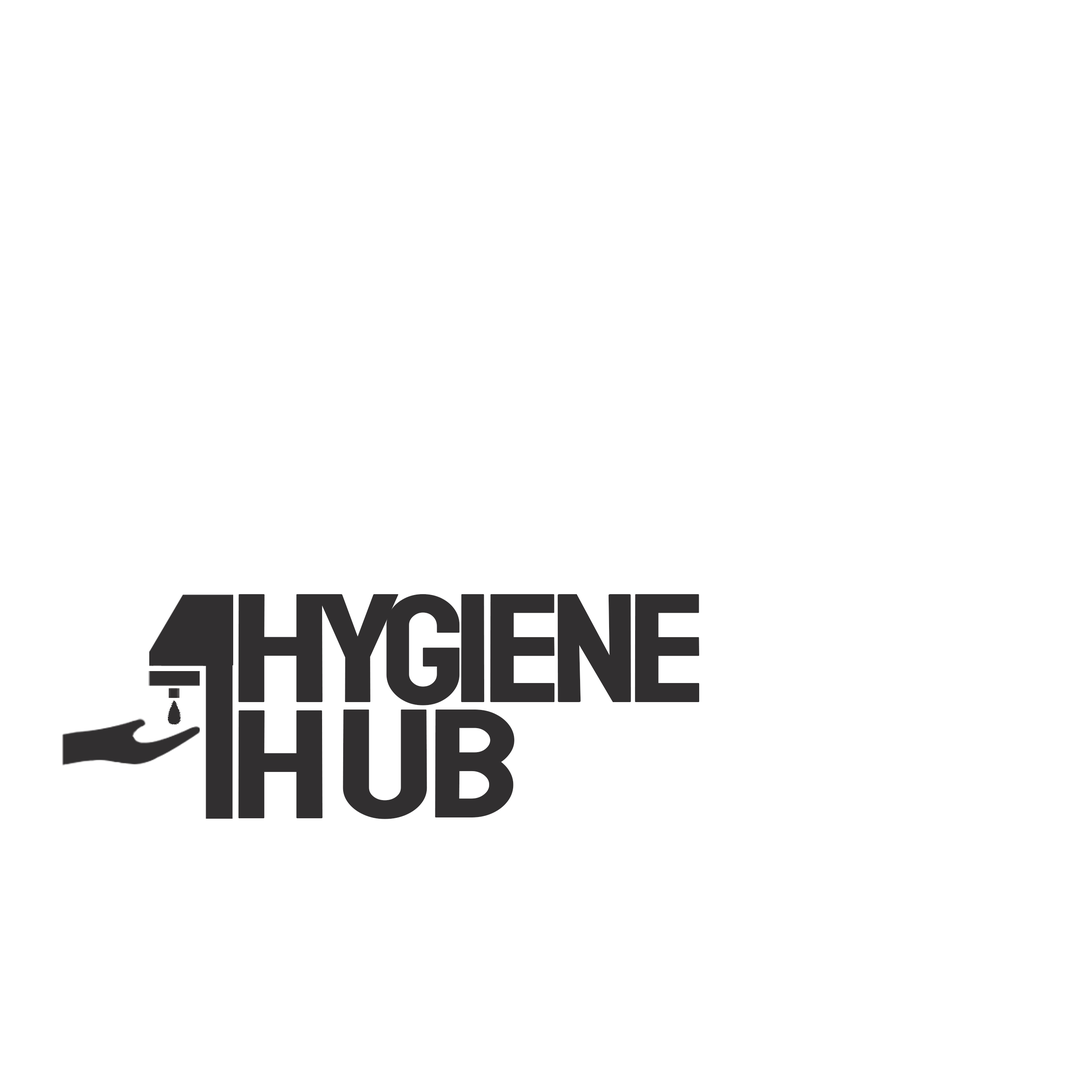
<style>
.page{position:relative;width:1092px;height:1092px;background:#ffffff}
.page>*{position:absolute;margin:0}
.t1{font:155.1px "Staatliches-Regular";color:#312f30;scale:1.2 1}
.t2{font:155.1px "Staatliches-Regular";color:#312f30;scale:1.38 1}
.t3{font:155.1px "Staatliches-Regular";color:#312f30;scale:1.34 1}
.t4{font:155.1px "Staatliches-Regular";color:#312f30;scale:1.22 1}
.t5{font:155.1px "Staatliches-Regular";color:#312f30;scale:1.25 1}
.t6{font:155.1px "Staatliches-Regular";color:#312f30;scale:1.29 1}
</style>
<div class="page">
<p class="t1" style="left:386px;top:594px;width:74px;height:111px">G</p>
<p class="t2" style="left:238px;top:594px;width:85px;height:108px">H</p>
<p class="t3" style="left:317px;top:594px;width:82px;height:108px">Y</p>
<p class="t4" style="left:461px;top:594px;width:24px;height:108px">I</p>
<p class="t5" style="left:490px;top:594px;width:64px;height:108px">E</p>
<p class="t5" style="left:557px;top:594px;width:74px;height:108px">N</p>
<p class="t5" style="left:635px;top:594px;width:64px;height:108px">E</p>
<p class="t2" style="left:238px;top:710px;width:85px;height:108px">H</p>
<p class="t2" style="left:343px;top:710px;width:84px;height:109px">U</p>
<p class="t6" style="left:435px;top:710px;width:79px;height:107px">B</p>
</div>
